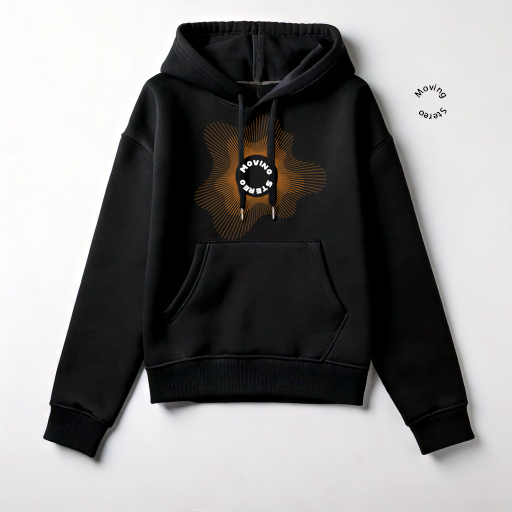
<style>
.page{position:relative;width:512px;height:512px}
.page>*{position:absolute;margin:0}
.t1{font:9.5px "MyriadPro-Regular";color:#000000}
.t2{font:8px "Alfarn";color:#ffffff}
</style>
<div class="page">
<p class="t1" style="left:414px;top:84px;width:33px;height:35px;rotate:-69deg">Moving    Stereo</p>
<p class="t2" style="left:239px;top:160px;width:34px;height:34px;rotate:-69deg">Moving  Stereo</p>
</div>
